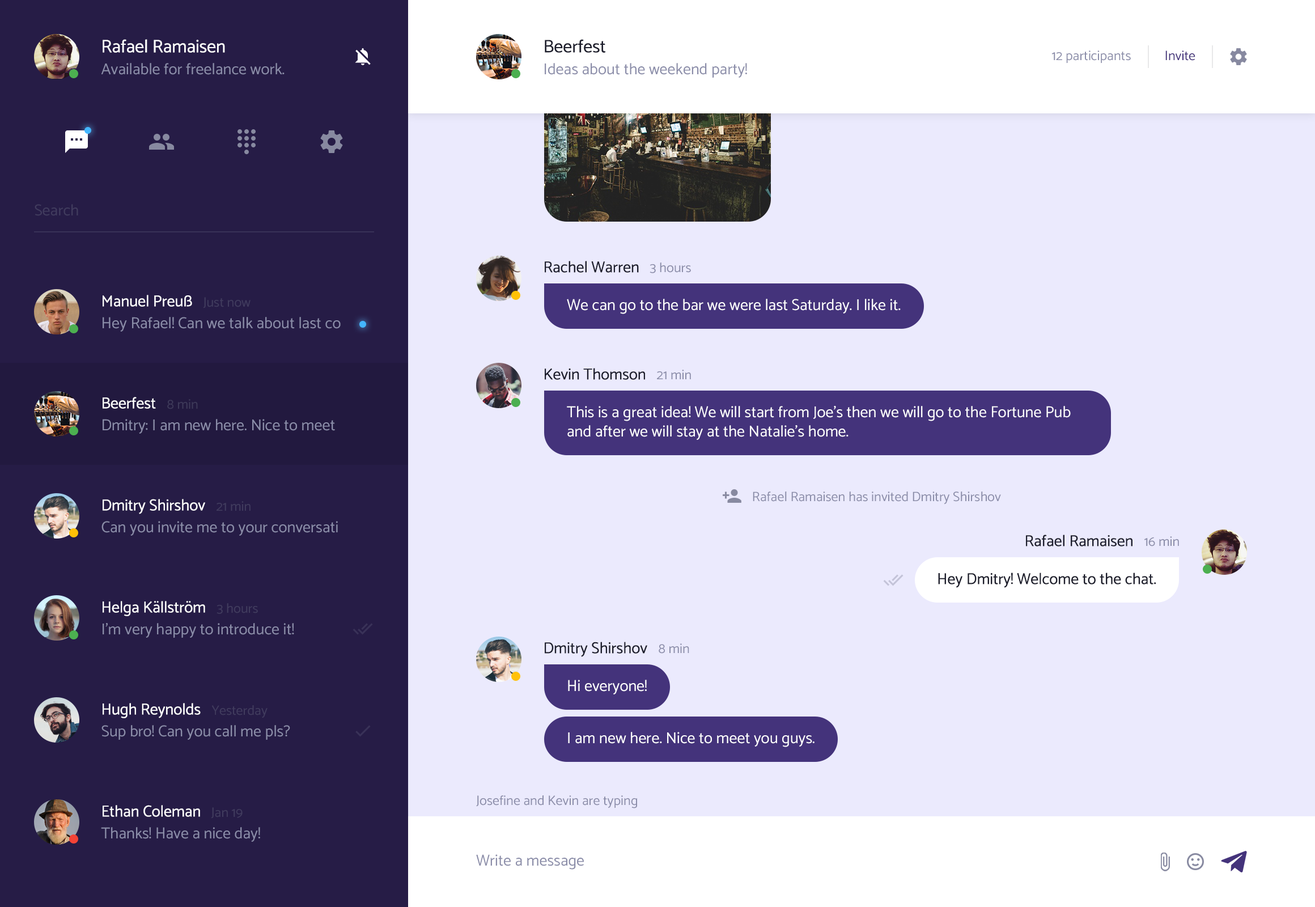
<style>
.page{position:relative;width:1315px;height:907px;background:#ebeafd}
.page>*{position:absolute;margin:0}
.t1{font:18.1px "Catamaran-Regular";color:#ffffff}
.t2{font:18.1px "Catamaran-Regular";color:#1d1e2c}
.t3{font:13.6px "Catamaran-Regular";color:#8b8da9}
.t4{font:13.6px "Catamaran-Regular";color:#44337b}
.t5{font:15.9px "Catamaran-Regular";color:#8b8da9}
.t6{font:15.9px "Catamaran-Regular";color:#413c5e}
.t7{font:15.9px "Catamaran-Regular";color:#1d1e2c}
.t8{font:15.9px "Catamaran-Regular";color:#ffffff}
.t9{font:13.6px "Catamaran-Regular";color:#413c5e}
.t10{font:13.6px "Catamaran-Regular";color:#3e3a5a}
</style>
<div class="page">
<p class="t1" style="left:103px;top:39px;width:122px;height:14px">Rafael Ramaisen</p>
<p class="t2" style="left:545px;top:39px;width:61px;height:14px">Beerfest</p>
<p class="t3" style="left:1051px;top:50px;width:80px;height:13px">12 participants</p>
<p class="t4" style="left:1165px;top:50px;width:30px;height:11px">Invite</p>
<p class="t5" style="left:101px;top:63px;width:184px;height:12px">Available for freelance work.</p>
<p class="t5" style="left:545px;top:63px;width:202px;height:15px">Ideas about the weekend party!</p>
<p class="t6" style="left:35px;top:204px;width:43px;height:12px">Search</p>
<p class="t7" style="left:545px;top:261px;width:94px;height:12px">Rachel Warren</p>
<p class="t3" style="left:650px;top:262px;width:41px;height:11px">3 hours</p>
<p class="t8" style="left:103px;top:295px;width:89px;height:12px">Manuel Preuß</p>
<p class="t9" style="left:203px;top:297px;width:48px;height:11px">Just now</p>
<p class="t8" style="left:567px;top:299px;width:334px;height:15px">We can go to the bar we were last Saturday. I like it.</p>
<p class="t5" style="left:103px;top:317px;width:238px;height:15px">Hey Rafael! Can we talk about last co</p>
<p class="t7" style="left:545px;top:368px;width:100px;height:12px">Kevin Thomson</p>
<p class="t3" style="left:657px;top:370px;width:34px;height:9px">21 min</p>
<p class="t8" style="left:103px;top:397px;width:53px;height:12px">Beerfest</p>
<p class="t10" style="left:167px;top:399px;width:31px;height:10px">8 min</p>
<p class="t8" style="left:567px;top:406px;width:504px;height:34px">This is a great idea! We will start from Joe’s then we will go to the Fortune Pub and after we will stay at the Natalie’s home.</p>
<p class="t5" style="left:103px;top:419px;width:232px;height:15px">Dmitry: I am new here. Nice to meet</p>
<p class="t3" style="left:753px;top:491px;width:248px;height:13px">Rafael Ramaisen has invited Dmitry Shirshov</p>
<p class="t8" style="left:103px;top:499px;width:102px;height:15px">Dmitry Shirshov</p>
<p class="t9" style="left:217px;top:501px;width:34px;height:10px">21 min</p>
<p class="t5" style="left:101px;top:521px;width:237px;height:15px">Can you invite me to your conversati</p>
<p class="t7" style="left:1026px;top:534px;width:106px;height:12px">Rafael Ramaisen</p>
<p class="t3" style="left:1144px;top:536px;width:35px;height:10px">16 min</p>
<p class="t7" style="left:938px;top:572px;width:218px;height:16px">Hey Dmitry! Welcome to the chat.</p>
<p class="t8" style="left:103px;top:601px;width:102px;height:15px">Helga Källström</p>
<p class="t9" style="left:217px;top:603px;width:41px;height:11px">3 hours</p>
<p class="t5" style="left:103px;top:623px;width:191px;height:15px">I’m very happy to introduce it!</p>
<p class="t7" style="left:545px;top:642px;width:102px;height:15px">Dmitry Shirshov</p>
<p class="t3" style="left:659px;top:643px;width:30px;height:10px">8 min</p>
<p class="t8" style="left:568px;top:680px;width:79px;height:14px">Hi everyone!</p>
<p class="t8" style="left:103px;top:703px;width:98px;height:15px">Hugh Reynolds</p>
<p class="t9" style="left:211px;top:705px;width:57px;height:13px">Yesterday</p>
<p class="t5" style="left:101px;top:725px;width:189px;height:15px">Sup bro! Can you call me pls?</p>
<p class="t8" style="left:568px;top:732px;width:246px;height:15px">I am new here. Nice to meet you guys.</p>
<p class="t3" style="left:476px;top:795px;width:161px;height:13px">Josefine and Kevin are typing</p>
<p class="t8" style="left:103px;top:805px;width:97px;height:12px">Ethan Coleman</p>
<p class="t9" style="left:211px;top:807px;width:32px;height:11px">Jan 19</p>
<p class="t5" style="left:101px;top:827px;width:159px;height:15px">Thanks! Have a nice day!</p>
<p class="t5" style="left:476px;top:854px;width:108px;height:15px">Write a message</p>
</div>
